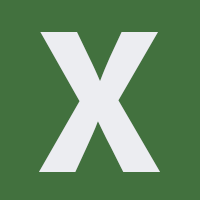
<style>
.page{position:relative;width:200px;height:200px;background:#42713e}
.page>*{position:absolute;margin:0}
.t1{font:208.3px "MyriadPro-Bold";color:#ecedf1}
</style>
<div class="page">
<p class="t1" style="left:39px;top:32px;width:121px;height:140px">X</p>
</div>
